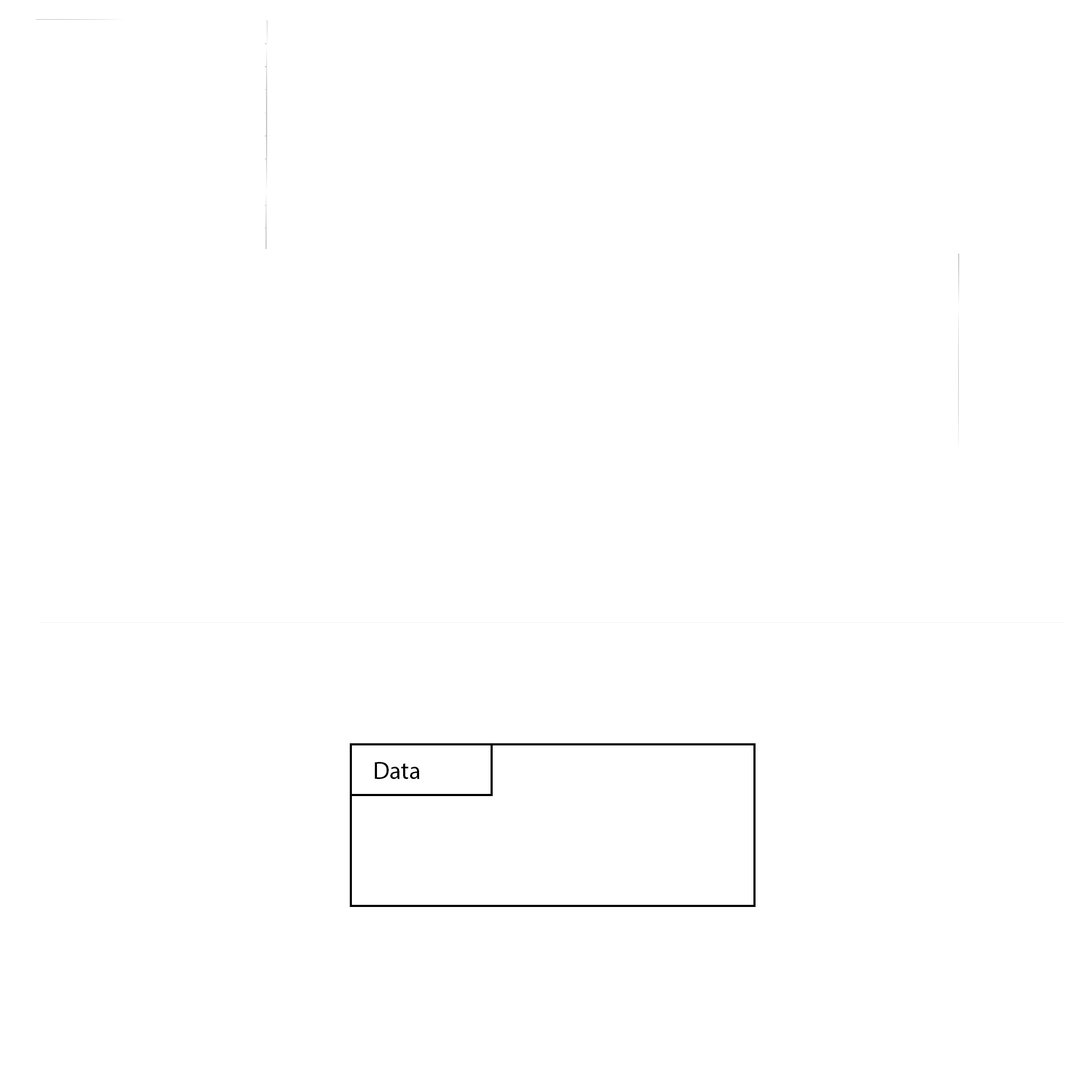
<style>
.page{position:relative;width:1092px;height:1092px;background:#ffffff}
.page>*{position:absolute;margin:0}
.t1{font:24.5px "MyriadPro-Regular";color:#000000}
</style>
<div class="page">
<p class="t1" style="left:375px;top:762px;width:45px;height:17px">Data</p>
</div>
